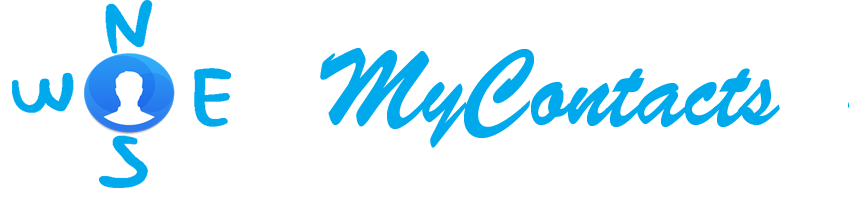
<style>
.page{position:relative;width:850px;height:200px;background:#ffffff}
.page>*{position:absolute;margin:0}
.t1{font:109px "BrushScriptStd";color:#00a8ec;scale:0.86 1}
</style>
<div class="page">
<p class="t1" style="left:320px;top:48px;width:460px;height:100px">MyContacts</p>
</div>
